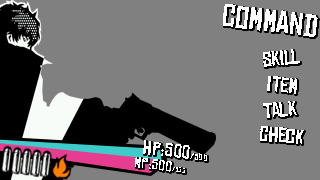
<style>
.page{position:relative;width:320px;height:180px;background:#808080}
.page>*{position:absolute;margin:0}
.t1{font:30px "ChineseRocksRg-Regular";color:#ffffff}
.t2{font:19.7px "ChineseRocksRg-Regular";color:#ffffff}
.t3{font:18.2px "ChineseRocksRg-Regular";letter-spacing:0.03em;color:#ffffff}
.t4{font:9.1px "ChineseRocksRg-Regular";letter-spacing:0.03em;color:#ffffff}
.t5{font:14.5px "ChineseRocksRg-Regular";letter-spacing:0.03em;color:#ffffff}
.t6{font:7.2px "ChineseRocksRg-Regular";letter-spacing:0.03em;color:#ffffff}
</style>
<div class="page">
<p class="t1" style="left:223px;top:4px;width:95px;height:33px;rotate:7deg">COMMAND</p>
<p class="t2" style="left:263px;top:49px;width:37px;height:18px;rotate:-5deg">Skill</p>
<p class="t2" style="left:267px;top:76px;width:30px;height:18px;rotate:5deg">ITEM</p>
<p class="t2" style="left:263px;top:101px;width:34px;height:17px;rotate:-5deg">TALK</p>
<p class="t2" style="left:260px;top:126px;width:44px;height:18px;rotate:4deg">CHECK</p>
<p class="t3" style="left:143px;top:140px;width:64px;height:21px;rotate:6deg">hp:500<span class="t4">/500</span></p>
<p class="t5" style="left:135px;top:157px;width:50px;height:16px;rotate:6deg">MP:500<span class="t6">/500</span></p>
</div>
